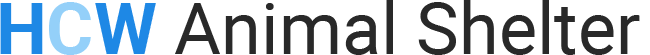
<style>
.page{position:relative;width:650px;height:55px;background:#ffffff}
.page>*{position:absolute;margin:0}
.t1{font:72px "Roboto-Regular";color:#292929}
.t2{font:72px "Roboto-Bold";color:#1e88e5}
.t3{font:72px "Roboto-Bold";color:#94d0f9}
</style>
<div class="page">
<p class="t1" style="left:0px;top:0px;width:640px;height:55px"><span class="t2">H</span><span class="t3">C</span><span class="t2">W </span>Animal Shelter</p>
</div>
